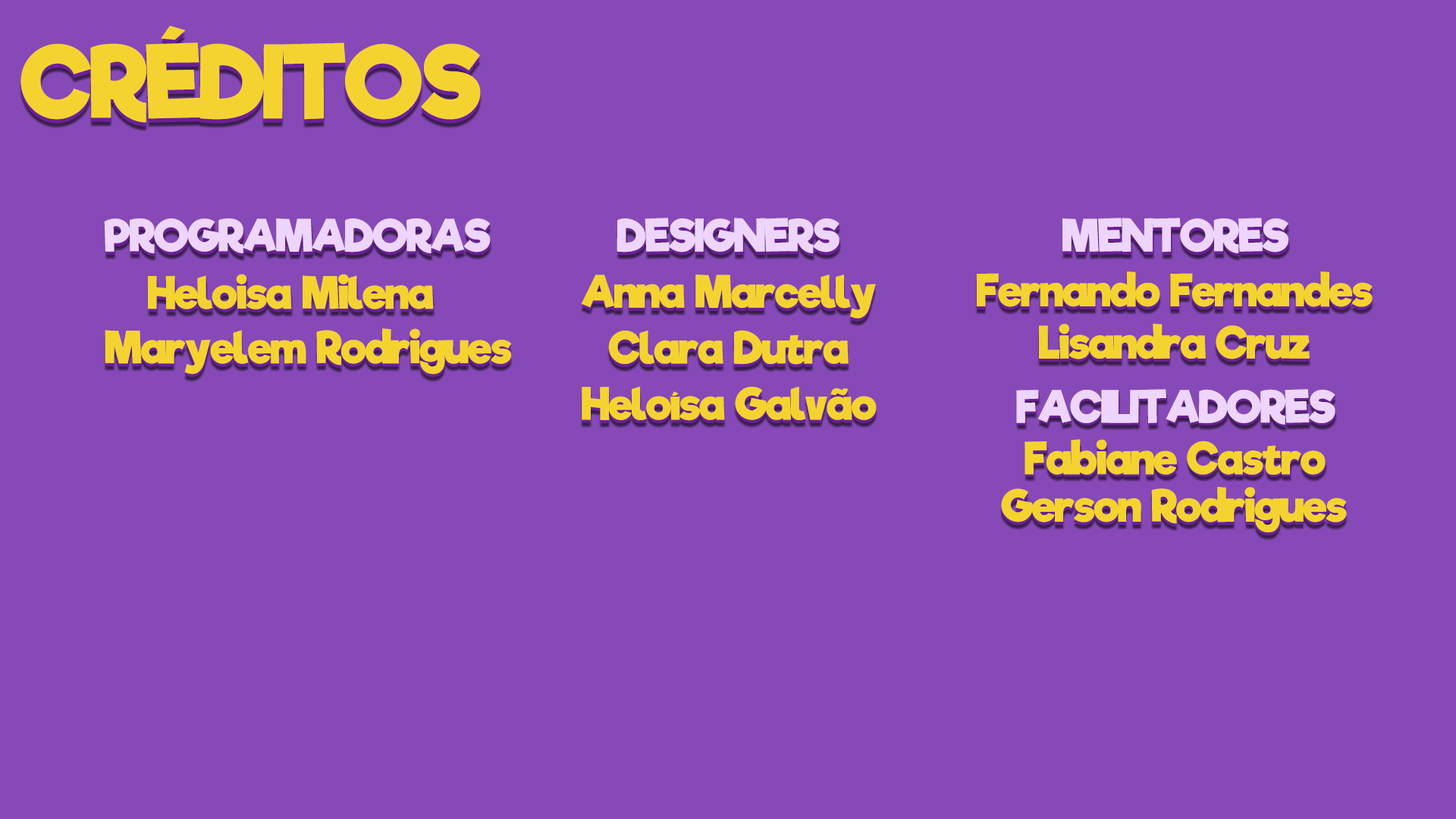
<style>
.page{position:relative;width:1456px;height:819px;background:#8749b7}
.page>*{position:absolute;margin:0}
.t1{font:167px "RifficFree-Bold";letter-spacing:-0.02em;color:#f4d331}
.t2{font:73.9px "RifficFree-Bold";letter-spacing:-0.02em;color:#eed5fd}
.t3{font:73.9px "RifficFree-Bold";letter-spacing:-0.02em;color:#f4d331}
</style>
<div class="page">
<p class="t1" style="left:20px;top:30px;width:461px;height:97px">CRÉDITOS</p>
<p class="t1" style="left:20px;top:26px;width:461px;height:97px">CRÉDITOS</p>
<p class="t2" style="left:104px;top:218px;width:387px;height:35px">PROGRAMADORAS</p>
<p class="t2" style="left:105px;top:221px;width:386px;height:35px">PROGRAMADORAS</p>
<p class="t2" style="left:617px;top:218px;width:222px;height:35px">DESIGNERS</p>
<p class="t2" style="left:617px;top:221px;width:223px;height:35px">DESIGNERS</p>
<p class="t2" style="left:1062px;top:218px;width:226px;height:35px">MENTORES</p>
<p class="t2" style="left:1063px;top:221px;width:226px;height:35px">MENTORES</p>
<p class="t3" style="left:148px;top:274px;width:286px;height:35px">Heloisa Milena</p>
<p class="t3" style="left:149px;top:277px;width:286px;height:35px">Heloisa Milena</p>
<p class="t3" style="left:581px;top:278px;width:295px;height:44px">Anna Marcelly</p>
<p class="t3" style="left:581px;top:275px;width:295px;height:43px">Anna Marcelly</p>
<p class="t3" style="left:977px;top:275px;width:396px;height:35px">Fernando Fernandes</p>
<p class="t3" style="left:977px;top:271px;width:396px;height:36px">Fernando Fernandes</p>
<p class="t3" style="left:105px;top:328px;width:406px;height:47px">Maryelem Rodrigues</p>
<p class="t3" style="left:608px;top:330px;width:241px;height:35px">Clara Dutra</p>
<p class="t3" style="left:1039px;top:326px;width:271px;height:36px">Lisandra Cruz</p>
<p class="t3" style="left:1039px;top:323px;width:271px;height:36px">Lisandra Cruz</p>
<p class="t3" style="left:105px;top:331px;width:406px;height:47px">Maryelem Rodrigues</p>
<p class="t3" style="left:608px;top:333px;width:241px;height:35px">Clara Dutra</p>
<p class="t3" style="left:582px;top:390px;width:295px;height:34px">Heloísa Galvão</p>
<p class="t3" style="left:582px;top:387px;width:295px;height:34px">Heloísa Galvão</p>
<p class="t2" style="left:1016px;top:389px;width:319px;height:36px">FACILITADORES</p>
<p class="t2" style="left:1017px;top:391px;width:319px;height:36px">FACILITADORES</p>
<p class="t3" style="left:1024px;top:439px;width:302px;height:36px">Fabiane Castro</p>
<p class="t3" style="left:1025px;top:441px;width:301px;height:36px">Fabiane Castro</p>
<p class="t3" style="left:1001px;top:490px;width:346px;height:45px">Gerson Rodrigues</p>
<p class="t3" style="left:1001px;top:487px;width:346px;height:45px">Gerson Rodrigues</p>
</div>
